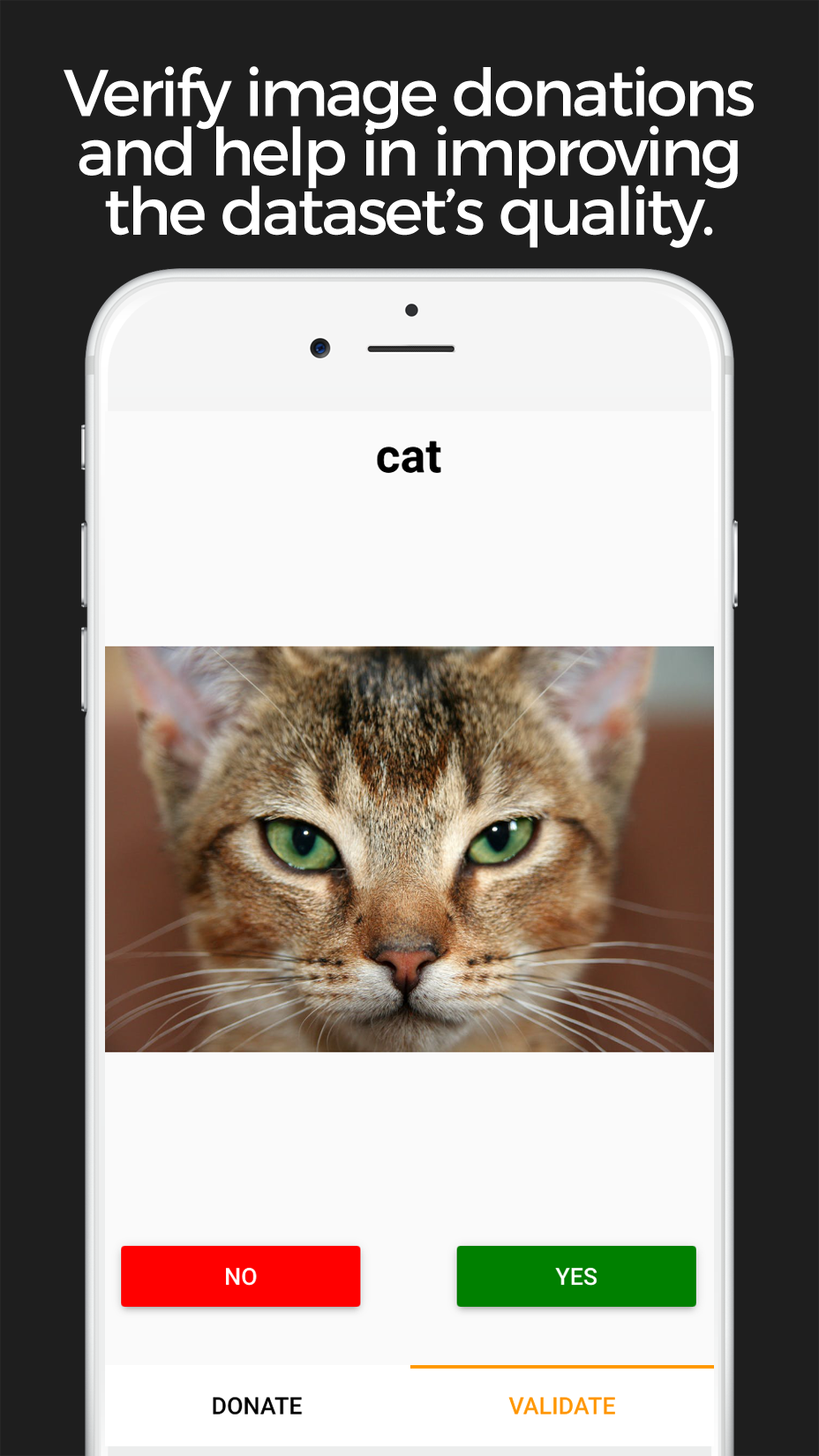
<style>
.page{position:relative;width:819px;height:1456px;background:#1e1e1e}
.page>*{position:absolute;margin:0}
.t1{font:65.9px/59.4px "Montserrat-Regular";letter-spacing:-0.05em;color:#ffffff}
</style>
<div class="page">
<p class="t1" style="left:64px;top:66px;width:690px;height:182px;text-align:center">Verify image donations<br>and help in improving<br>the dataset’s quality.</p>
</div>
